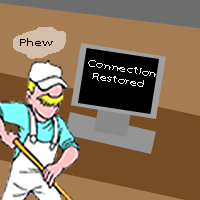
<style>
.page{position:relative;width:200px;height:200px;background:#a67c52}
.page>*{position:absolute;margin:0}
.t1{font:10px "MyriadPro-Regular";color:#000000;scale:1.5 1}
.t2{font:10px "MyriadPro-Regular";color:#f4f4f4;scale:1.5 1}
</style>
<div class="page">
<p class="t1" style="left:20px;top:38px;width:33px;height:8px">Phew</p>
<p class="t2" style="left:88px;top:60px;width:68px;height:27px;rotate:9deg">Connection Restored</p>
</div>
